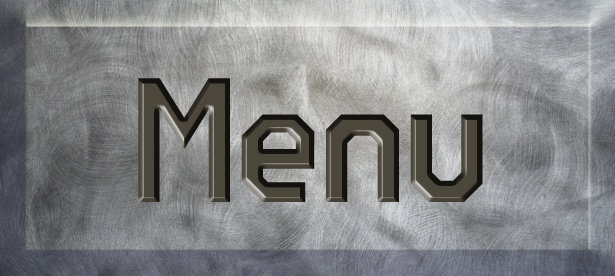
<style>
.page{position:relative;width:615px;height:276px}
.page>*{position:absolute;margin:0}
.t1{font:150px "WillowBody";color:#4b473b}
</style>
<div class="page">
<p class="t1" style="left:138px;top:78px;width:345px;height:124px">Menu</p>
</div>
